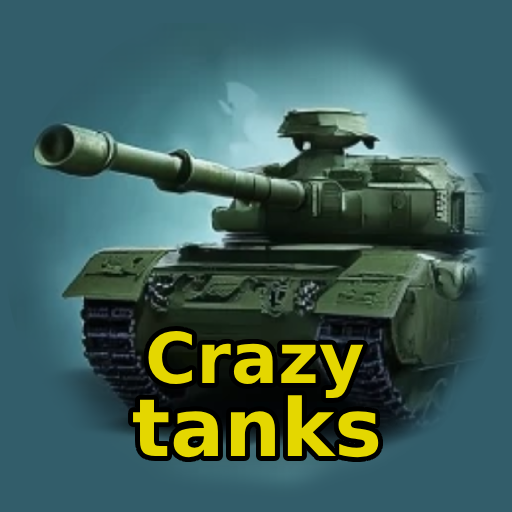
<style>
.page{position:relative;width:512px;height:512px;background:#325d6a}
.page>*{position:absolute;margin:0}
.t1{font:70px "DejaVuSans-Bold";color:#e4d700}
.t2{font:80px "DejaVuSans-Bold";color:#e4d700}
</style>
<div class="page">
<p class="t1" style="left:148px;top:331px;width:216px;height:68px">Crazy</p>
<p class="t2" style="left:133px;top:395px;width:246px;height:63px">tanks</p>
</div>
